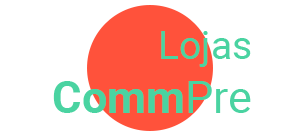
<style>
.page{position:relative;width:300px;height:135px;background:#ffffff}
.page>*{position:absolute;margin:0}
.t1{font:38.9px "Roboto-Regular";color:#4ad3a1}
.t2{font:44.8px "Roboto-Bold";color:#4ad3a1}
.t3{font:44.8px "Roboto-Regular";color:#4ad3a1}
</style>
<div class="page">
<p class="t1" style="left:53px;top:31px;width:198px;height:82px;text-align:right">Lojas<br><span class="t2">Comm</span><span class="t3">Pre</span></p>
</div>
